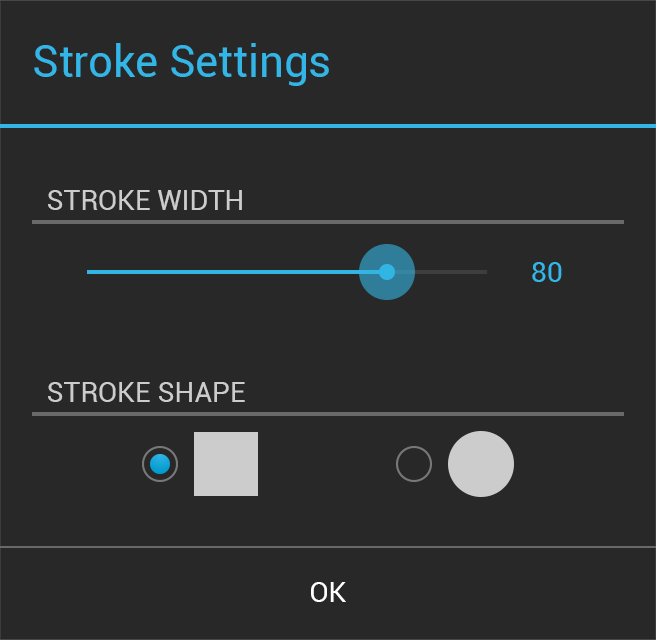
<style>
.page{position:relative;width:656px;height:640px;background:#282828}
.page>*{position:absolute;margin:0}
.t1{font:44.4px "Roboto-Regular";color:#33b5e5}
.t2{font:28.4px "Roboto-Regular";color:#cccccc}
.t3{font:28.4px "Roboto-Regular";color:#33b5e5}
.t4{font:28.4px "Roboto-Regular";color:#ffffff}
</style>
<div class="page">
<p class="t1" style="left:34px;top:43px;width:295px;height:43px">Stroke Settings</p>
<p class="t2" style="left:48px;top:190px;width:194px;height:20px">STROKE WIDTH</p>
<p class="t3" style="left:532px;top:262px;width:30px;height:20px">80</p>
<p class="t2" style="left:48px;top:382px;width:197px;height:20px">STROKE SHAPE</p>
<p class="t4" style="left:311px;top:582px;width:35px;height:20px">OK</p>
</div>
